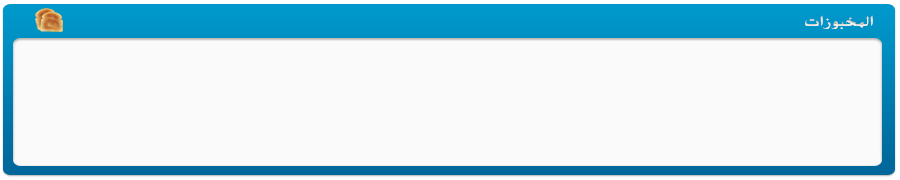
<style>
.page{position:relative;width:900px;height:180px;background:#fafafa}
.page>*{position:absolute;margin:0}
.t1{font:16px "BoutrosAdsMedium";color:#eaeae7}
</style>
<div class="page">
<p class="t1" style="left:805px;top:15px;width:68px;height:14px">المخبوزات</p>
</div>
